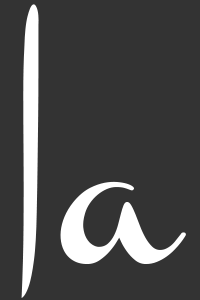
<style>
.page{position:relative;width:200px;height:300px;background:#333333}
.page>*{position:absolute;margin:0}
.t1{font:258.9px "Channel";color:#ffffff;scale:1.73 1}
.t2{font:135px "Channel";color:#ffffff}
</style>
<div class="page">
<p class="t1" style="left:21px;top:4px;width:18px;height:294px">|</p>
<p class="t2" style="left:60px;top:181px;width:126px;height:83px">a</p>
</div>
